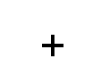
<style>
.page{position:relative;width:105px;height:83px;background:#ffffff}
.page>*{position:absolute;margin:0}
.t1{font:47.9px "DroidSans";color:#000000}
</style>
<div class="page">
<p class="t1" style="left:42px;top:34px;width:22px;height:23px">+</p>
</div>
